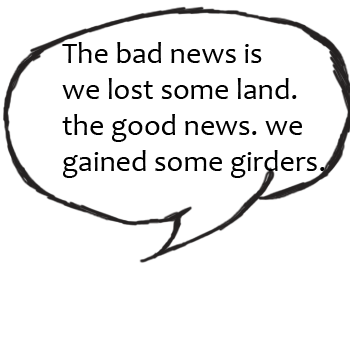
<style>
.page{position:relative;width:350px;height:350px;background:#ffffff}
.page>*{position:absolute;margin:0}
.t1{font:30px "Candara";color:#000000}
</style>
<div class="page">
<p class="t1" style="left:62px;top:42px;width:263px;height:136px">The bad news is<br>we lost some land.<br>the good news. we<br>gained some girders.</p>
</div>
